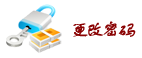
<style>
.page{position:relative;width:142px;height:58px;background:#ffffff}
.page>*{position:absolute;margin:0}
.t1{font:18px "FZSTK--GBK1-0";letter-spacing:-0.14em;color:#8a0303;font-weight:bold}
</style>
<div class="page">
<p class="t1" style="left:73px;top:21px;width:63px;height:16px">更改密码</p>
</div>
